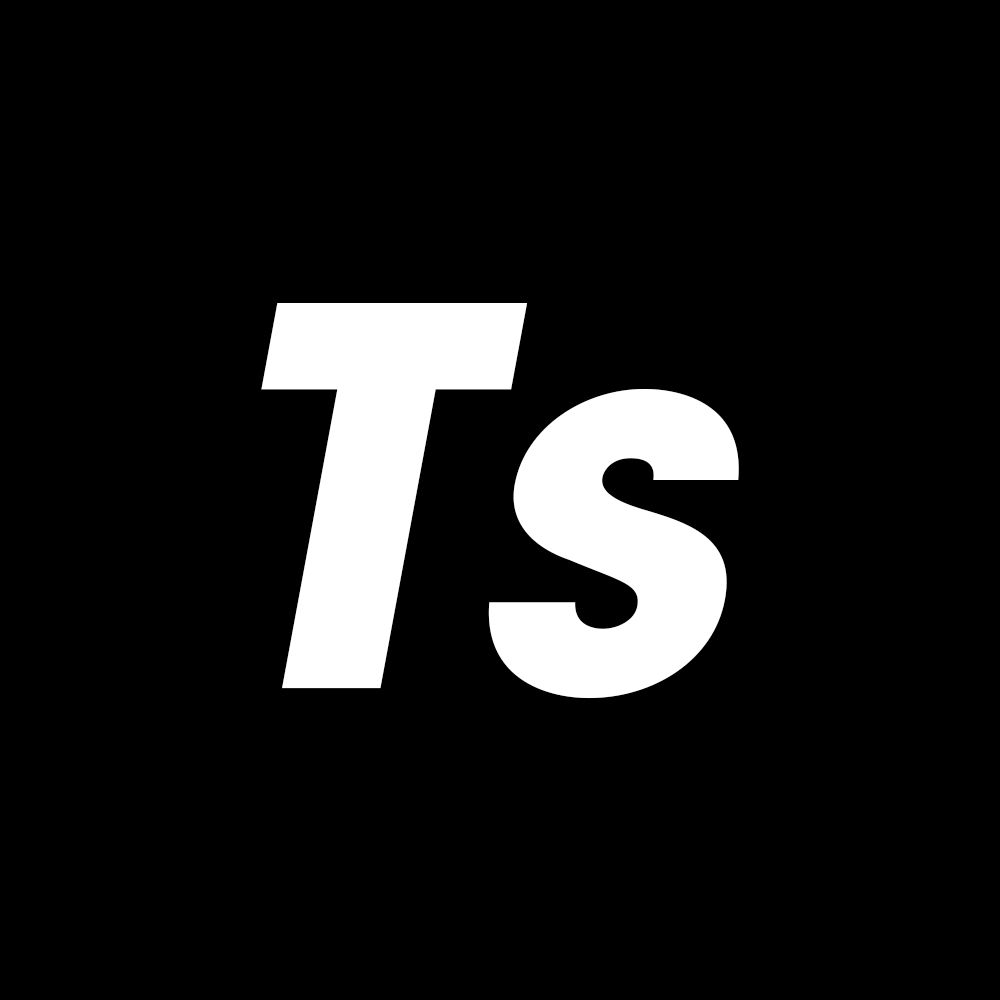
<style>
.page{position:relative;width:1000px;height:1000px;background:#000000}
.page>*{position:absolute;margin:0}
.t1{font:520px "AvantGardeLT-BoldObl";color:#ffffff}
</style>
<div class="page">
<p class="t1" style="left:261px;top:303px;width:478px;height:396px">Ts</p>
</div>
